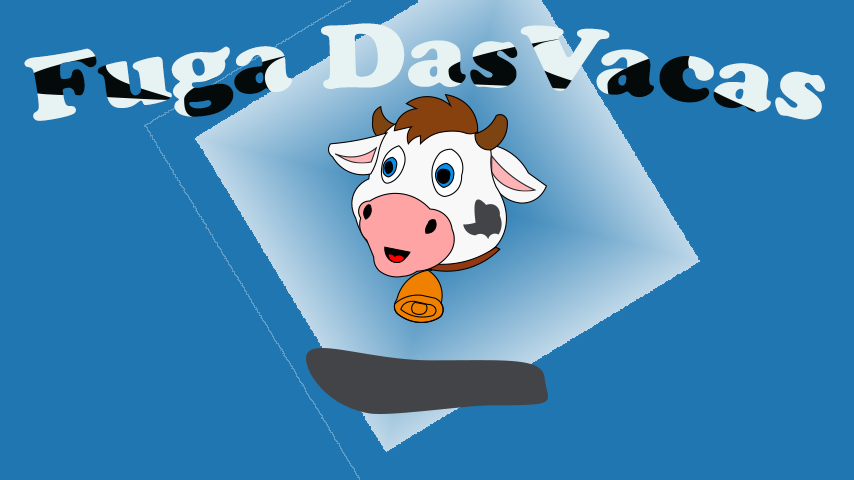
<style>
.page{position:relative;width:854px;height:480px;background:#2076b0}
.page>*{position:absolute;margin:0}
.t1{font:93.8px "CooperBlack";color:#e7f2f2;scale:0.95 1}
</style>
<div class="page">
<p class="t1" style="left:24px;top:23px;width:801px;height:98px">Fuga DasVacas</p>
</div>
